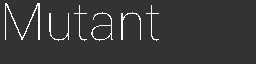
<style>
.page{position:relative;width:256px;height:64px;background:#333333}
.page>*{position:absolute;margin:0}
.t1{font:52px "Roboto-Thin";color:#ffffff}
</style>
<div class="page">
<p class="t1" style="left:5px;top:3px;width:154px;height:38px">Mutant</p>
</div>
